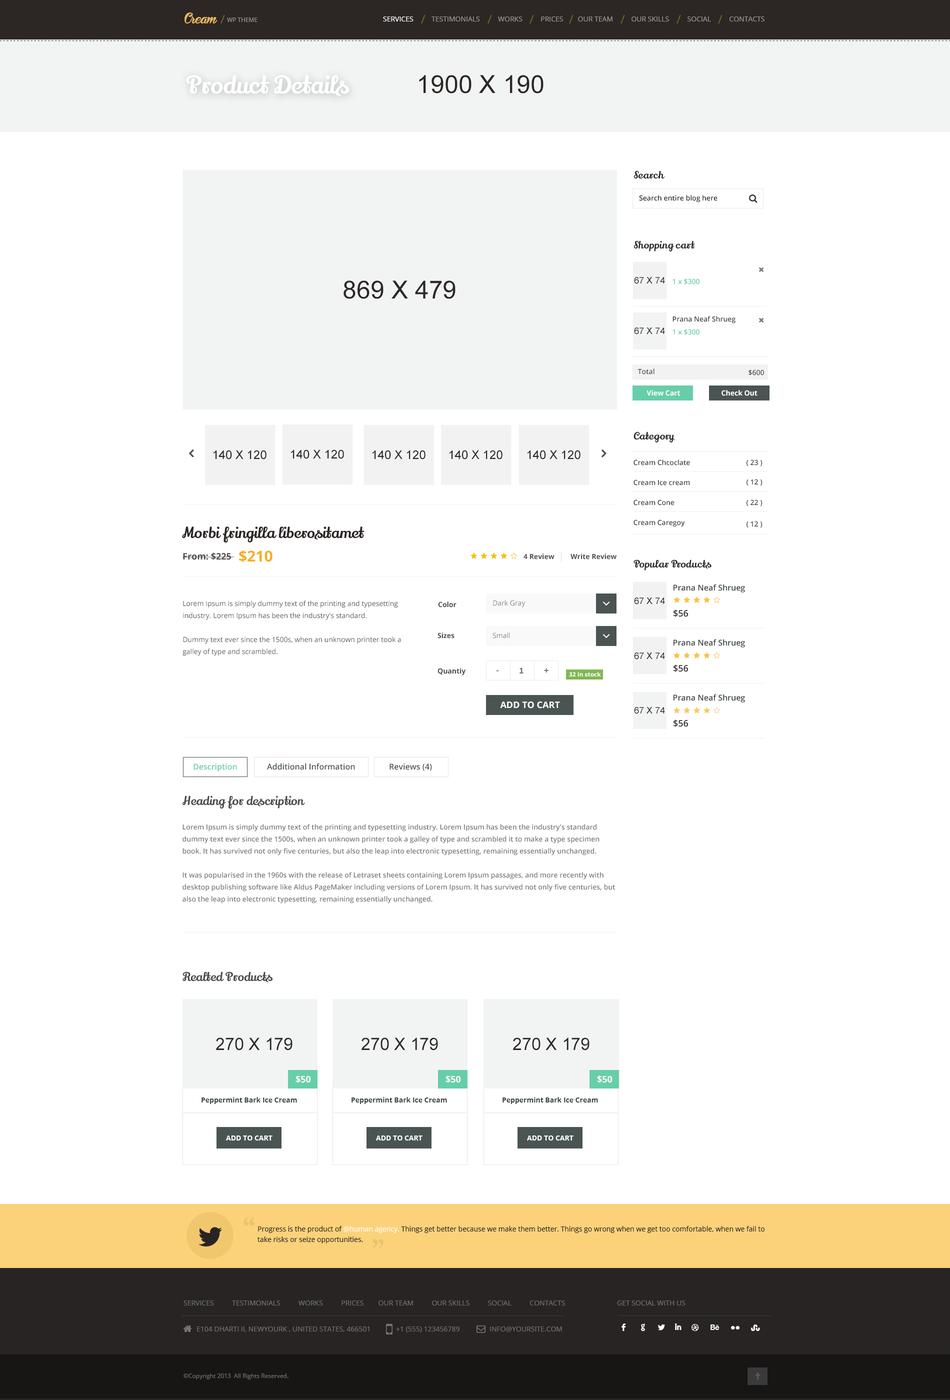
<style>
.page{position:relative;width:950px;height:1400px;background:#ffffff}
.page>*{position:absolute;margin:0}
.t1{font:13px "Bira-PERSONALUSEONLY";color:#e5b65c}
.t2{font:12px "OpenSans";color:#786225;text-transform:uppercase}
.t3{font:6px "OpenSans";color:#959185;text-transform:uppercase}
.t4{font:7px "OpenSans";color:#9a928f;text-transform:uppercase}
.t5{font:7px "OpenSans";color:#ffffff;text-transform:uppercase}
.t6{font:24px "LilyScriptOne-Regular";color:#ffffff}
.t7{font:25px "ArialMT";color:#2c2725}
.t8{font:10px "LilyScriptOne-Regular";color:#2c2725}
.t9{font:7px "OpenSans-Semibold";color:#2c2725}
.t10{font:9px "ArialMT";color:#2c2725}
.t11{font:7px "OpenSans-Semibold";color:#67cea9}
.t12{font:7px "OpenSans-Semibold";color:#3a4543}
.t13{font:7px "OpenSans-Semibold";color:#4a5553}
.t14{font:7px "OpenSans-Bold";color:#ffffff}
.t15{font:12px "ArialMT";color:#2c2725}
.t16{font:15px "LilyScriptOne-Regular";color:#2c2725}
.t17{font:9px "OpenSans-Bold";color:#4f4b49}
.t18{font:15px "OpenSans-Bold";color:#f6ad20}
.t19{font:7px "OpenSans-Bold";color:#4f4b49}
.t20{font:8px "OpenSans-Semibold";color:#3a4543}
.t21{font:7px/12px "OpenSans";color:#4a5553}
.t22{font:7px "OpenSans";color:#837e7c}
.t23{font:9px "OpenSans-Semibold";color:#2c2725}
.t24{font:9px "SourceSansPro-Bold";color:#747672}
.t25{font:6px "OpenSans-Bold";color:#ffffff}
.t26{font:9px "OpenSans-Bold";color:#fefefe;text-transform:uppercase}
.t27{font:8px "OpenSans-Semibold";color:#67cea9}
.t28{font:8px "OpenSans-Semibold";color:#4a5553}
.t29{font:12px "LilyScriptOne-Regular";color:#4f4b49}
.t30{font:7px/12px "OpenSans-Semibold";color:#7a7a7a}
.t31{font:17px "ArialMT";color:#2c2725}
.t32{font:9px "OpenSans-Bold";color:#ffffff}
.t33{font:7px "OpenSans-Bold";color:#3a4543}
.t34{font:7px "OpenSans-Bold";color:#ffffff;text-transform:uppercase}
.t35{font:36px "PlantagenetCherokee";color:#eac36f}
.t36{font:40.5px "Socialico";color:#282424}
.t37{font:7px/10.5px "OpenSans";color:#282424}
.t38{font:7px/10.5px "OpenSans";color:#ffffff}
.t39{font:7px "OpenSans";color:#6e6d6d;text-transform:uppercase}
.t40{font:12px "Socialico";color:#ffffff;text-transform:uppercase}
.t41{font:6px "OpenSans";color:#6d6d6d}
</style>
<div class="page">
<p class="t1" style="left:184px;top:12px;width:34px;height:12px">Cream</p>
<p class="t2" style="left:220px;top:15px;width:5px;height:9px">/</p>
<p class="t3" style="left:227px;top:18px;width:31px;height:4px">wp theme</p>
<p class="t4" style="left:383px;top:16px;width:381px;height:6px"><span class="t5">Services</span>          Testimonials          Works          Prices        Our Team          Our Skills          Social          Contacts</p>
<p class="t2" style="left:421px;top:15px;width:5px;height:9px">/</p>
<p class="t2" style="left:488px;top:15px;width:4px;height:9px">/</p>
<p class="t2" style="left:530px;top:15px;width:4px;height:9px">/</p>
<p class="t2" style="left:569px;top:15px;width:5px;height:9px">/</p>
<p class="t2" style="left:620px;top:15px;width:5px;height:9px">/</p>
<p class="t2" style="left:676px;top:15px;width:5px;height:9px">/</p>
<p class="t2" style="left:718px;top:15px;width:4px;height:9px">/</p>
<p class="t6" style="left:186px;top:75px;width:164px;height:21px">Product Details</p>
<p class="t7" style="left:419px;top:75px;width:125px;height:19px">1900 X 190</p>
<p class="t8" style="left:634px;top:170px;width:30px;height:8px">Search</p>
<p class="t9" style="left:639px;top:195px;width:79px;height:7px">Search entire blog here</p>
<p class="t8" style="left:634px;top:240px;width:61px;height:12px">Shopping cart</p>
<p class="t7" style="left:344px;top:280px;width:112px;height:19px">869 X 479</p>
<p class="t10" style="left:634px;top:277px;width:31px;height:7px">67 X 74</p>
<p class="t11" style="left:672px;top:278px;width:28px;height:6px">1 x $300</p>
<p class="t12" style="left:672px;top:316px;width:64px;height:8px">Prana Neaf Shrueg</p>
<p class="t10" style="left:634px;top:328px;width:31px;height:6px">67 X 74</p>
<p class="t11" style="left:672px;top:329px;width:28px;height:6px">1 x $300</p>
<p class="t13" style="left:638px;top:368px;width:16px;height:6px">Total</p>
<p class="t13" style="left:748px;top:370px;width:16px;height:6px">$600</p>
<p class="t14" style="left:646px;top:390px;width:34px;height:6px">View Cart</p>
<p class="t14" style="left:722px;top:390px;width:36px;height:6px">Check Out</p>
<p class="t8" style="left:634px;top:432px;width:41px;height:10px">Category</p>
<p class="t15" style="left:291px;top:450px;width:53px;height:9px">140 X 120</p>
<p class="t15" style="left:214px;top:450px;width:52px;height:10px">140 X 120</p>
<p class="t15" style="left:372px;top:450px;width:54px;height:10px">140 X 120</p>
<p class="t15" style="left:450px;top:450px;width:52px;height:10px">140 X 120</p>
<p class="t15" style="left:528px;top:450px;width:52px;height:10px">140 X 120</p>
<p class="t12" style="left:634px;top:460px;width:56px;height:6px">Cream Chcoclate</p>
<p class="t12" style="left:746px;top:460px;width:16px;height:6px">( 23 )</p>
<p class="t12" style="left:634px;top:480px;width:56px;height:6px">Cream Ice cream</p>
<p class="t12" style="left:746px;top:479px;width:16px;height:7px">( 12 )</p>
<p class="t12" style="left:634px;top:500px;width:40px;height:6px">Cream Cone</p>
<p class="t12" style="left:746px;top:500px;width:16px;height:6px">( 22 )</p>
<p class="t12" style="left:634px;top:520px;width:51px;height:7px">Cream Caregoy</p>
<p class="t12" style="left:746px;top:521px;width:16px;height:7px">( 12 )</p>
<p class="t16" style="left:182px;top:526px;width:182px;height:16px">Morbi fringilla liberositamet</p>
<p class="t17" style="left:182px;top:552px;width:52px;height:8px">From: $225</p>
<p class="t18" style="left:239px;top:550px;width:33px;height:12px">$210</p>
<p class="t19" style="left:524px;top:554px;width:30px;height:6px">4 Review</p>
<p class="t19" style="left:570px;top:554px;width:46px;height:6px">Write Review</p>
<p class="t8" style="left:634px;top:560px;width:78px;height:10px">Popular Products</p>
<p class="t20" style="left:674px;top:584px;width:71px;height:8px">Prana Neaf Shrueg</p>
<p class="t21" style="left:182px;top:600px;width:219px;height:56px">Lorem Ipsum is simply dummy text of the printing and typesetting industry. Lorem Ipsum has been the industry's standard.<br><br>Dummy text ever since the 1500s, when an unknown printer took a galley of type and scrambled.</p>
<p class="t19" style="left:438px;top:602px;width:18px;height:6px">Color</p>
<p class="t22" style="left:493px;top:600px;width:33px;height:8px">Dark Gray</p>
<p class="t10" style="left:634px;top:598px;width:31px;height:6px">67 X 74</p>
<p class="t23" style="left:674px;top:610px;width:14px;height:7px">$56</p>
<p class="t19" style="left:438px;top:632px;width:16px;height:6px">Sizes</p>
<p class="t22" style="left:492px;top:632px;width:18px;height:6px">Small</p>
<p class="t20" style="left:674px;top:639px;width:71px;height:9px">Prana Neaf Shrueg</p>
<p class="t10" style="left:634px;top:652px;width:31px;height:8px">67 X 74</p>
<p class="t23" style="left:674px;top:664px;width:14px;height:8px">$56</p>
<p class="t19" style="left:438px;top:668px;width:28px;height:8px">Quantiy</p>
<p class="t24" style="left:496px;top:670px;width:3px;height:2px">-</p>
<p class="t24" style="left:520px;top:668px;width:4px;height:6px">1</p>
<p class="t24" style="left:544px;top:668px;width:4px;height:5px">+</p>
<p class="t25" style="left:569px;top:672px;width:32px;height:4px">32 in stock</p>
<p class="t26" style="left:500px;top:702px;width:60px;height:6px">Add to Cart</p>
<p class="t20" style="left:674px;top:694px;width:71px;height:8px">Prana Neaf Shrueg</p>
<p class="t10" style="left:634px;top:707px;width:31px;height:7px">67 X 74</p>
<p class="t23" style="left:674px;top:720px;width:14px;height:7px">$56</p>
<p class="t27" style="left:194px;top:764px;width:43px;height:8px">Description</p>
<p class="t28" style="left:267px;top:763px;width:88px;height:7px">Additional Information</p>
<p class="t28" style="left:390px;top:764px;width:42px;height:7px">Reviews (4)</p>
<p class="t29" style="left:182px;top:796px;width:123px;height:13px">Heading for description</p>
<p class="t30" style="left:182px;top:824px;width:434px;height:80px">Lorem Ipsum is simply dummy text of the printing and typesetting industry. Lorem Ipsum has been the industry's standard dummy text ever since the 1500s, when an unknown printer took a galley of type and scrambled it to make a type specimen book. It has survived not only five centuries, but also the leap into electronic typesetting, remaining essentially unchanged. <br><br>It was popularised in the 1960s with the release of Letraset sheets containing Lorem Ipsum passages, and more recently with desktop publishing software like Aldus PageMaker including versions of Lorem Ipsum. It has survived not only five centuries, but also the leap into electronic typesetting, remaining essentially unchanged.</p>
<p class="t29" style="left:182px;top:972px;width:91px;height:10px">Realted Products</p>
<p class="t31" style="left:216px;top:1038px;width:76px;height:12px">270 X 179</p>
<p class="t31" style="left:362px;top:1038px;width:76px;height:12px">270 X 179</p>
<p class="t31" style="left:513px;top:1038px;width:77px;height:12px">270 X 179</p>
<p class="t32" style="left:296px;top:1076px;width:15px;height:7px">$50</p>
<p class="t32" style="left:446px;top:1076px;width:15px;height:7px">$50</p>
<p class="t32" style="left:597px;top:1076px;width:15px;height:7px">$50</p>
<p class="t33" style="left:202px;top:1097px;width:95px;height:7px">Peppermint Bark Ice Cream</p>
<p class="t33" style="left:352px;top:1097px;width:95px;height:7px">Peppermint Bark Ice Cream</p>
<p class="t33" style="left:502px;top:1097px;width:96px;height:7px">Peppermint Bark Ice Cream</p>
<p class="t34" style="left:226px;top:1136px;width:46px;height:4px">Add to Cart</p>
<p class="t34" style="left:376px;top:1136px;width:46px;height:4px">Add to Cart</p>
<p class="t34" style="left:527px;top:1136px;width:47px;height:4px">Add to Cart</p>
<p class="t35" style="left:244px;top:1217px;width:10px;height:9px">“</p>
<p class="t36" style="left:198px;top:1227px;width:24px;height:19px">L</p>
<p class="t37" style="left:258px;top:1226px;width:506px;height:18px">Progress is the product of <span class="t38">@human agency.</span> Things get better because we make them better. Things go wrong when we get too comfortable, when we fail to <br>take risks or seize opportunities.</p>
<p class="t35" style="left:372px;top:1239px;width:12px;height:9px;rotate:180deg">“</p>
<p class="t39" style="left:184px;top:1300px;width:381px;height:6px">Services          Testimonials          Works          Prices        Our Team          Our Skills          Social          Contacts</p>
<p class="t39" style="left:617px;top:1300px;width:69px;height:6px">Get Social With Us</p>
<p class="t40" style="left:622px;top:1324px;width:4px;height:7px">F</p>
<p class="t40" style="left:641px;top:1324px;width:4px;height:7px">g</p>
<p class="t40" style="left:658px;top:1324px;width:7px;height:6px">l</p>
<p class="t40" style="left:675px;top:1324px;width:7px;height:6px">i</p>
<p class="t40" style="left:692px;top:1324px;width:7px;height:7px">d</p>
<p class="t40" style="left:710px;top:1324px;width:10px;height:6px">e</p>
<p class="t40" style="left:731px;top:1326px;width:9px;height:4px">n</p>
<p class="t40" style="left:751px;top:1324px;width:9px;height:7px">s</p>
<p class="t39" style="left:197px;top:1326px;width:173px;height:6px">E104 Dharti II, Newyourk , United States, 466501</p>
<p class="t39" style="left:396px;top:1326px;width:64px;height:6px">+1 (555) 123456789</p>
<p class="t39" style="left:490px;top:1326px;width:72px;height:6px">info@yoursite.com</p>
<p class="t41" style="left:184px;top:1374px;width:104px;height:6px">©Copyright 2013  All Rights Reserved.</p>
</div>
